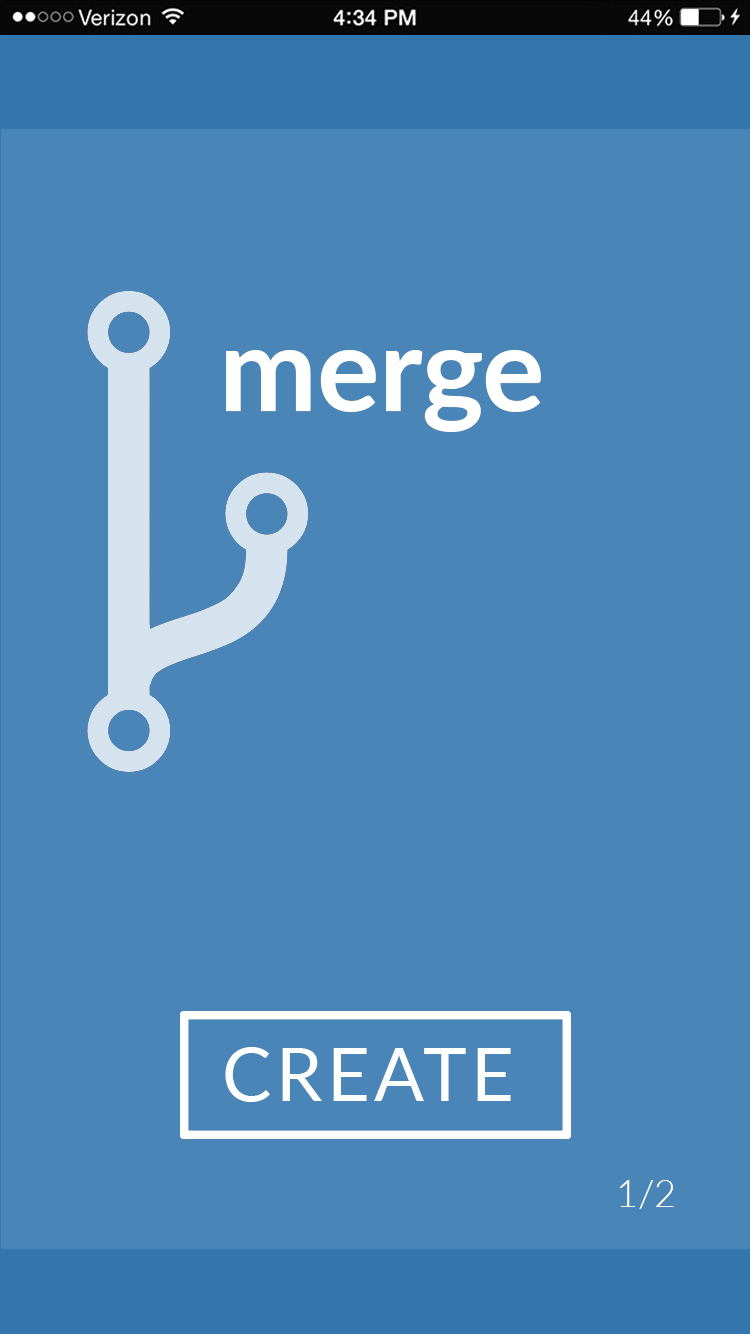
<style>
.page{position:relative;width:750px;height:1334px;background:#4985b7}
.page>*{position:absolute;margin:0}
.t1{font:116.7px "Lato-Bold";color:#ffffff}
.t2{font:73.7px "Lato-Regular";letter-spacing:0.06em;color:#ffffff}
.t3{font:37.5px "Lato-Light";color:#ffffff}
</style>
<div class="page">
<p class="t1" style="left:226px;top:350px;width:315px;height:82px">merge</p>
<p class="t2" style="left:225px;top:1047px;width:286px;height:55px">CREATE</p>
<p class="t3" style="left:619px;top:1180px;width:55px;height:29px">1/2</p>
</div>
